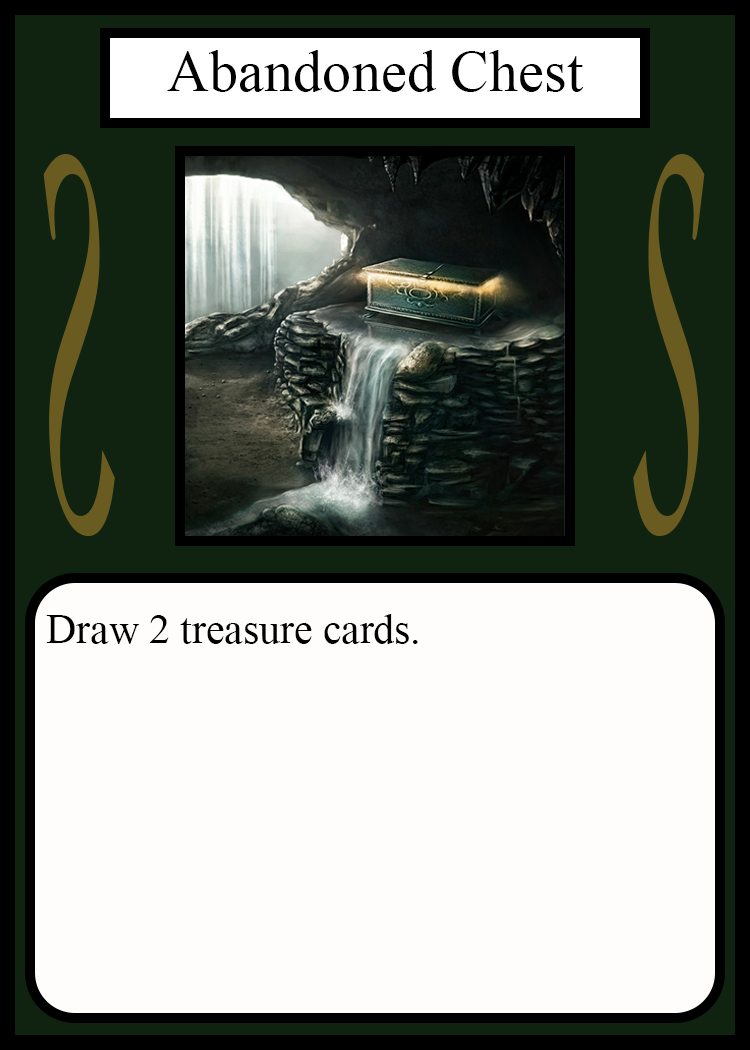
<style>
.page{position:relative;width:750px;height:1050px;background:#fffcfc}
.page>*{position:absolute;margin:0}
.t1{font:58.3px "TimesNewRomanPSMT";color:#010101}
.t2{font:548.5px "Apple-Chancery";color:#6a5c21;scale:0.27 1}
.t3{font:548.2px "Apple-Chancery";color:#6a5c21;scale:0.27 1}
.t4{font:41.7px "TimesNewRomanPSMT";color:#000000}
</style>
<div class="page">
<p class="t1" style="left:167px;top:50px;width:417px;height:42px">Abandoned Chest</p>
<p class="t2" style="left:43px;top:154px;width:72px;height:382px;rotate:180deg">S</p>
<p class="t3" style="left:633px;top:154px;width:72px;height:382px">S</p>
<p class="t4" style="left:46px;top:614px;width:372px;height:30px">Draw 2 treasure cards.</p>
</div>
